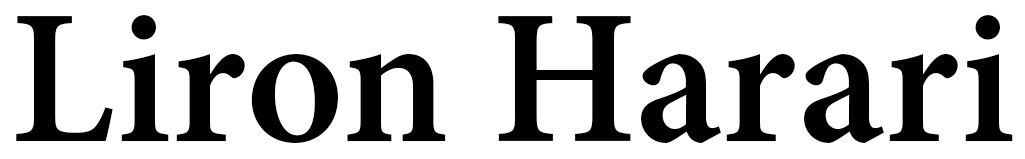
<style>
.page{position:relative;width:1025px;height:159px;background:#ffffff}
.page>*{position:absolute;margin:0}
.t1{font:208.3px "AdobeDevanagari-Bold";color:#000000}
</style>
<div class="page">
<p class="t1" style="left:16px;top:15px;width:997px;height:128px">Liron Harari</p>
</div>
